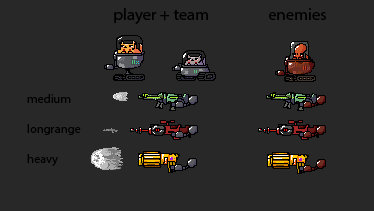
<style>
.page{position:relative;width:374px;height:211px;background:#282828}
.page>*{position:absolute;margin:0}
.t1{font:16.7px "MyriadPro-Regular";color:#000000}
.t2{font:12.5px "MyriadPro-Regular";color:#000000}
</style>
<div class="page">
<p class="t1" style="left:269px;top:8px;width:57px;height:12px">enemies</p>
<p class="t2" style="left:27px;top:94px;width:54px;height:72px">medium<br><br>longrange<br><br>heavy</p>
</div>
